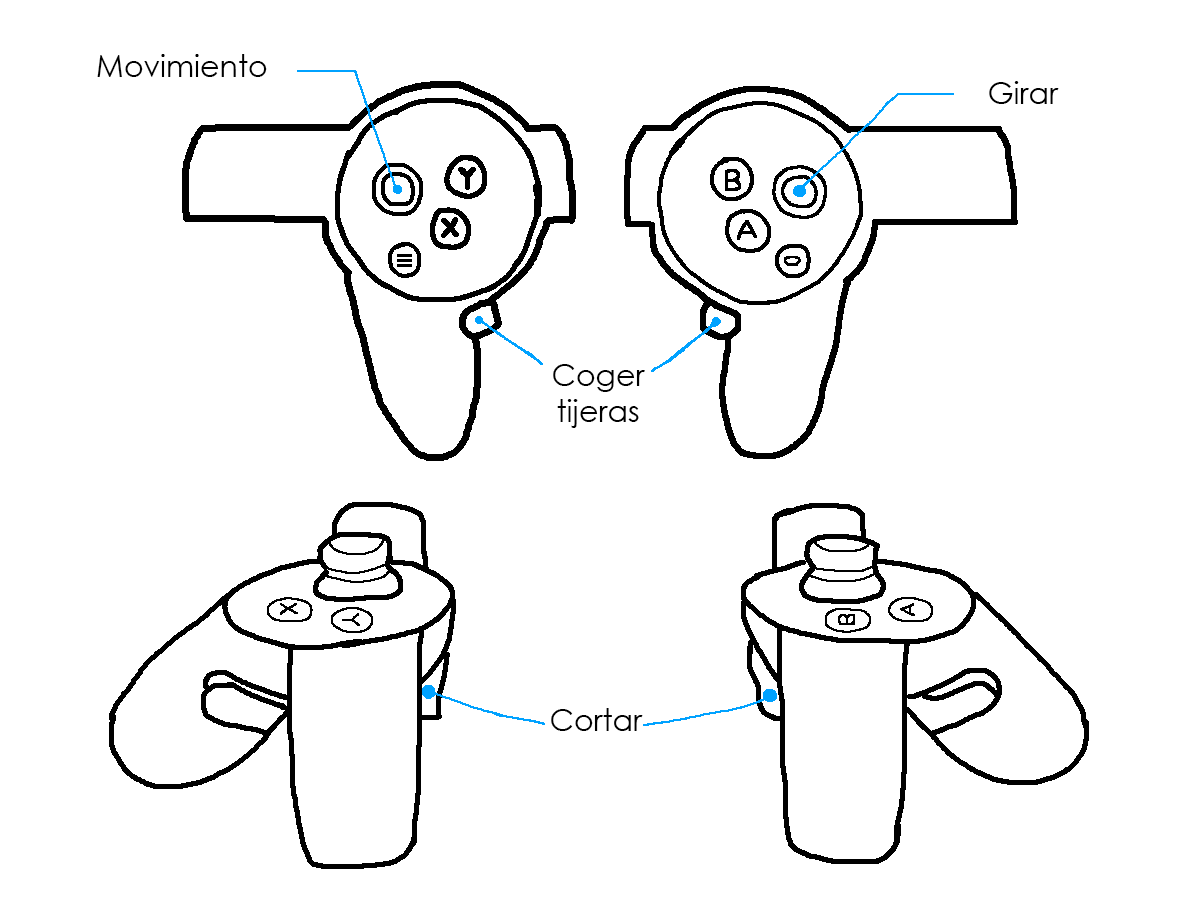
<style>
.page{position:relative;width:1200px;height:900px;background:#ffffff}
.page>*{position:absolute;margin:0}
.t1{font:30px "CenturyGothic";color:#000000}
</style>
<div class="page">
<p class="t1" style="left:97px;top:54px;width:170px;height:23px">Movimiento</p>
<p class="t1" style="left:989px;top:81px;width:70px;height:23px">Girar</p>
<p class="t1" style="left:553px;top:364px;width:92px;height:64px;text-align:center">Coger tijeras</p>
<p class="t1" style="left:551px;top:708px;width:92px;height:23px">Cortar</p>
</div>
